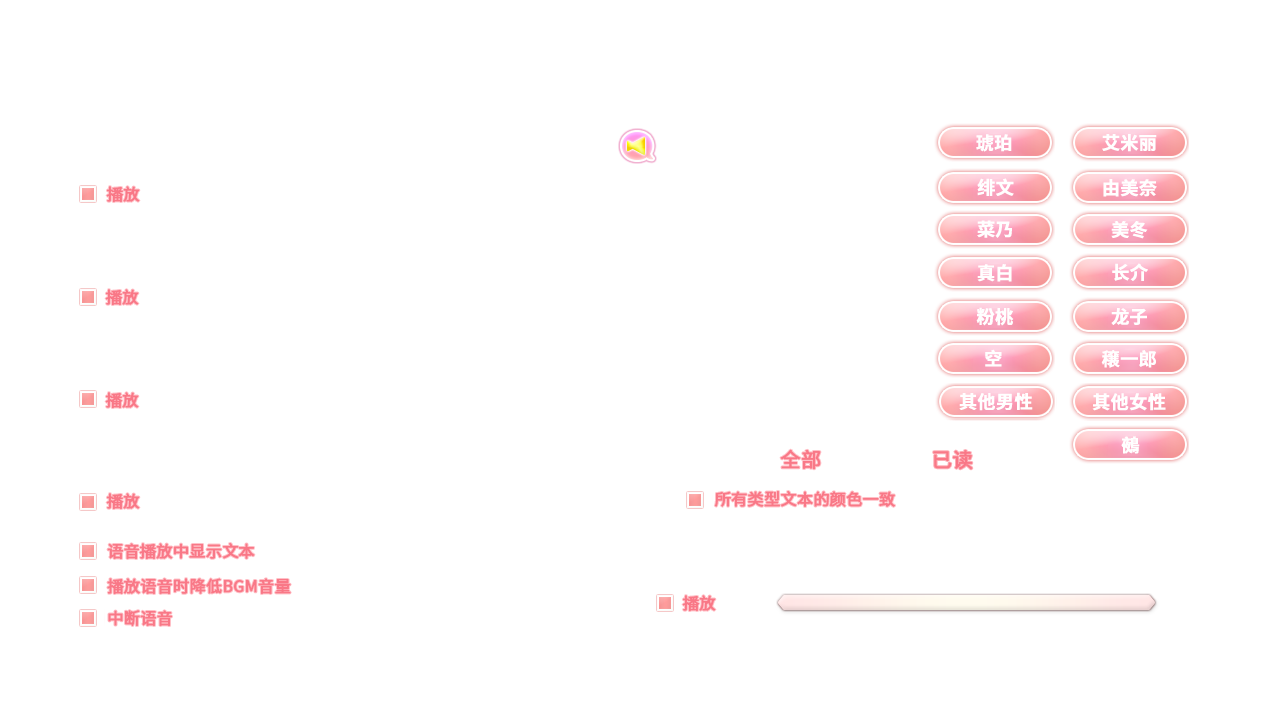
<style>
.page{position:relative;width:1280px;height:720px;background:#ffffff}
.page>*{position:absolute;margin:0}
.t1{font:18px "SourceHanSansSC-Bold";color:#ffffff;font-weight:bold}
.t2{font:16px "SourceHanSansSC-Regular";color:#f97887;font-weight:bold}
.t3{font:20px "SourceHanSansSC-Regular";color:#f97887;font-weight:bold}
</style>
<div class="page">
<p class="t1" style="left:976px;top:134px;width:36px;height:18px">琥珀</p>
<p class="t1" style="left:1102px;top:134px;width:55px;height:18px">艾米丽</p>
<p class="t1" style="left:977px;top:178px;width:37px;height:18px">绯文</p>
<p class="t1" style="left:1103px;top:179px;width:54px;height:18px">由美奈</p>
<p class="t2" style="left:106px;top:186px;width:34px;height:16px">播放</p>
<p class="t1" style="left:977px;top:220px;width:35px;height:18px">菜乃</p>
<p class="t1" style="left:1111px;top:221px;width:37px;height:18px">美冬</p>
<p class="t1" style="left:977px;top:264px;width:35px;height:18px">真白</p>
<p class="t1" style="left:1112px;top:263px;width:36px;height:18px">长介</p>
<p class="t2" style="left:105px;top:289px;width:34px;height:16px">播放</p>
<p class="t1" style="left:976px;top:307px;width:38px;height:19px">粉桃</p>
<p class="t1" style="left:1111px;top:308px;width:36px;height:17px">龙子</p>
<p class="t1" style="left:985px;top:349px;width:17px;height:18px">空</p>
<p class="t1" style="left:1101px;top:350px;width:55px;height:18px">穣一郎</p>
<p class="t2" style="left:105px;top:392px;width:34px;height:16px">播放</p>
<p class="t1" style="left:959px;top:392px;width:74px;height:19px">其他男性</p>
<p class="t1" style="left:1092px;top:393px;width:74px;height:18px">其他女性</p>
<p class="t1" style="left:1121px;top:436px;width:19px;height:18px">鵺</p>
<p class="t3" style="left:780px;top:449px;width:41px;height:21px">全部</p>
<p class="t3" style="left:933px;top:450px;width:40px;height:20px">已读</p>
<p class="t2" style="left:106px;top:493px;width:34px;height:16px">播放</p>
<p class="t2" style="left:714px;top:491px;width:181px;height:16px">所有类型文本的颜色一致</p>
<p class="t2" style="left:107px;top:543px;width:148px;height:16px">语音播放中显示文本</p>
<p class="t2" style="left:107px;top:578px;width:184px;height:16px">播放语音时降低BGM音量</p>
<p class="t2" style="left:682px;top:595px;width:34px;height:16px">播放</p>
<p class="t2" style="left:108px;top:610px;width:64px;height:16px">中断语音</p>
</div>
